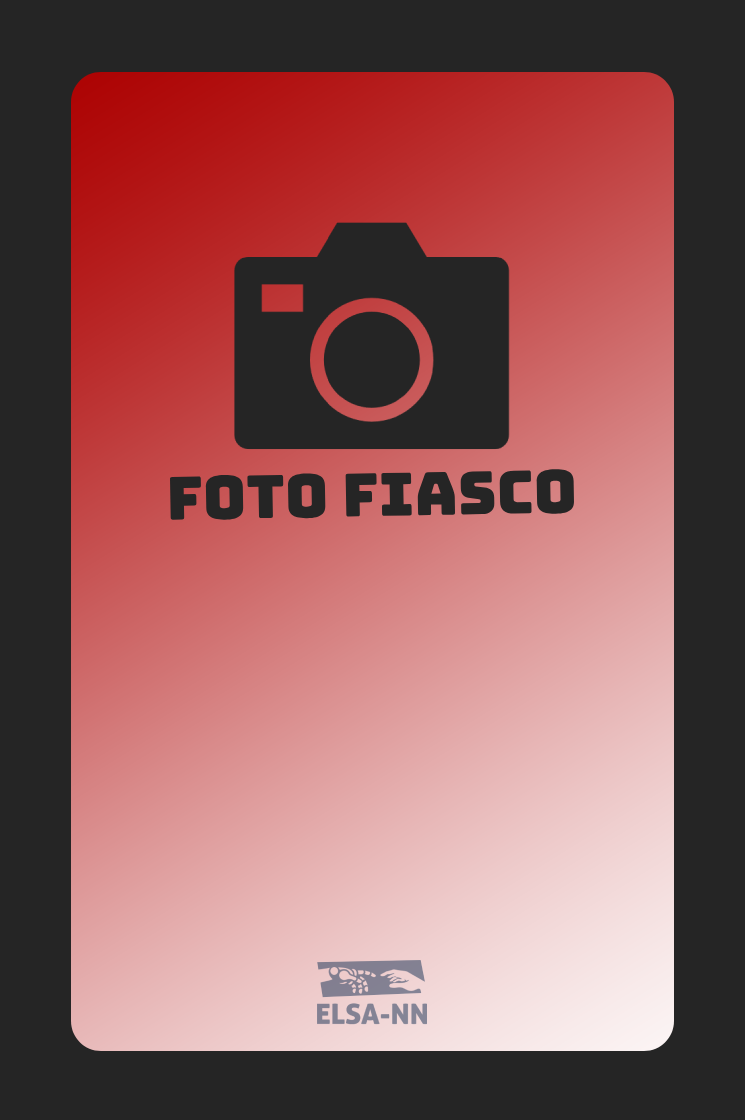
<style>
.page{position:relative;width:745px;height:1120px;background:#252525}
.page>*{position:absolute;margin:0}
.t1{font:59.4px "Bungee-Regular";color:#252525}
</style>
<div class="page">
<p class="t1" style="left:169px;top:468px;width:406px;height:52px;rotate:-1deg">Foto Fiasco</p>
</div>
